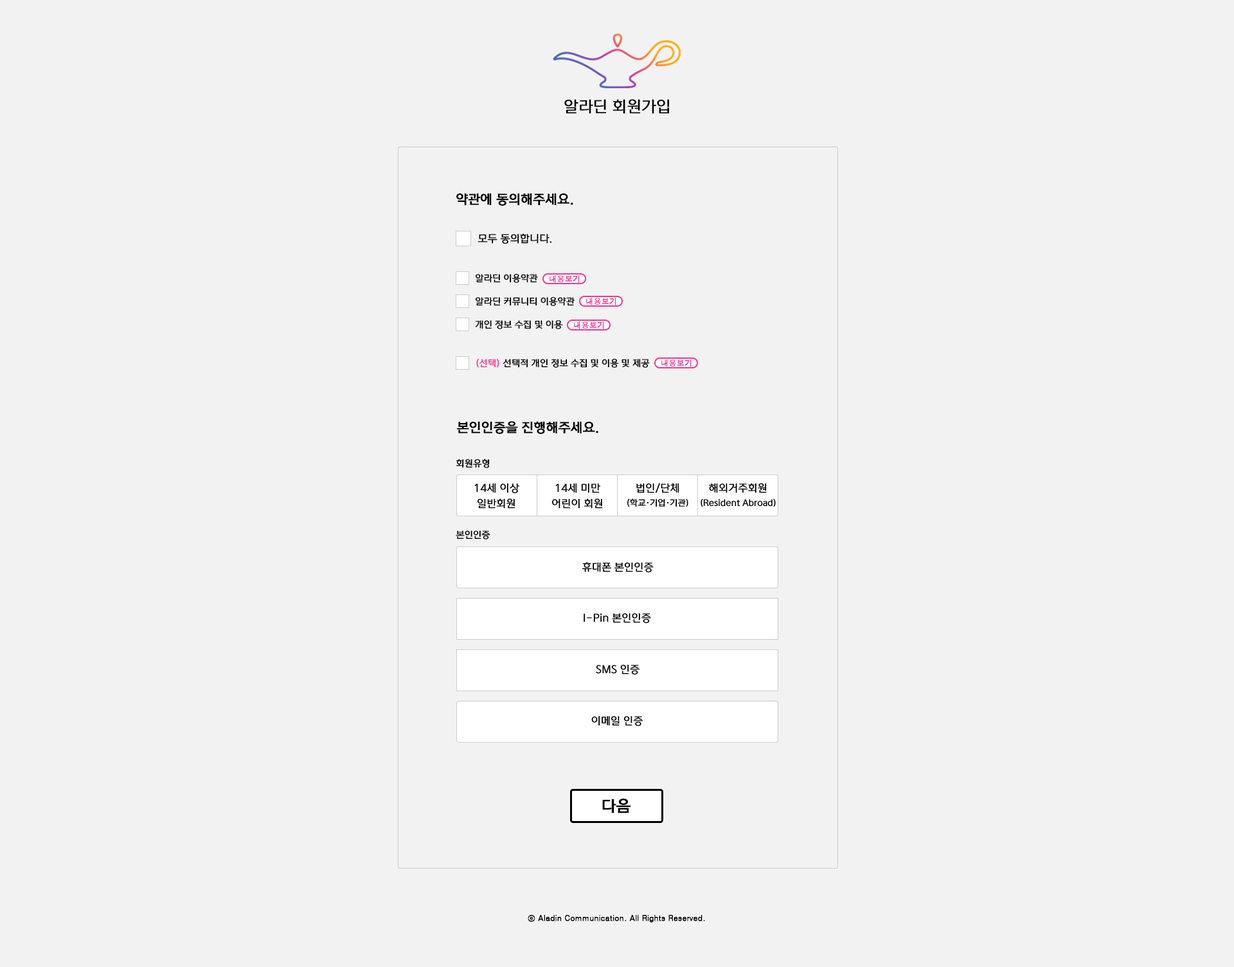
<style>
.page{position:relative;width:1234px;height:967px;background:#f2f2f2}
.page>*{position:absolute;margin:0}
.t1{font:15.4px "ONEMobileRegular";color:#000000;font-weight:bold}
.t2{font:12.9px "ONEMobileBold";color:#000000;font-weight:bold}
.t3{font:10.3px "ONEMobileRegular";color:#000000;font-weight:bold}
.t4{font:9px "ONEMobileRegular";color:#000000;font-weight:bold}
.t5{font:7.7px "Dotum";color:#ee3897;font-weight:bold}
.t6{font:9px "ONEMobileRegular";color:#ee3897;font-weight:bold}
.t7{font:10.3px/15.4px "ONEMobileRegular";color:#000000;font-weight:bold}
.t8{font:8.4px/15.4px "ONEMobileRegular";color:#000000;font-weight:bold}
.t9{font:15.4px "ONEMobileBold";color:#000000;font-weight:bold}
.t10{font:7.7px "Dotum";color:#000000;font-weight:bold}
</style>
<div class="page">
<p class="t1" style="left:564px;top:99px;width:106px;height:15px">알라딘 회원가입</p>
<p class="t2" style="left:456px;top:193px;width:117px;height:13px">약관에 동의해주세요.</p>
<p class="t3" style="left:478px;top:233px;width:74px;height:11px">모두 동의합니다.</p>
<p class="t4" style="left:475px;top:273px;width:63px;height:10px">알라딘 이용약관</p>
<p class="t5" style="left:550px;top:275px;width:30px;height:8px">내용보기</p>
<p class="t4" style="left:475px;top:296px;width:100px;height:10px">알라딘 커뮤니티 이용약관</p>
<p class="t5" style="left:586px;top:298px;width:30px;height:7px">내용보기</p>
<p class="t4" style="left:475px;top:320px;width:88px;height:9px">개인 정보 수집 및 이용</p>
<p class="t5" style="left:574px;top:321px;width:30px;height:8px">내용보기</p>
<p class="t4" style="left:476px;top:358px;width:174px;height:10px"><span class="t6">(선택)</span> 선택적 개인 정보 수집 및 이용 및 제공</p>
<p class="t5" style="left:662px;top:359px;width:30px;height:8px">내용보기</p>
<p class="t2" style="left:457px;top:421px;width:141px;height:13px">본인인증을 진행해주세요.</p>
<p class="t4" style="left:456px;top:458px;width:34px;height:10px">회원유형</p>
<p class="t7" style="left:474px;top:483px;width:45px;height:26px;text-align:center">14세 이상<br>일반회원</p>
<p class="t7" style="left:552px;top:483px;width:51px;height:26px;text-align:center">14세 미만<br>어린이 회원</p>
<p class="t8" style="left:627px;top:483px;width:61px;height:24px;text-align:center"><span class="t7">법인/단체<br></span>(학교·기업·기관)</p>
<p class="t8" style="left:701px;top:483px;width:75px;height:24px;text-align:center"><span class="t7">해외거주회원<br></span>(Resident Abroad)</p>
<p class="t4" style="left:456px;top:530px;width:35px;height:9px">본인인증</p>
<p class="t3" style="left:582px;top:562px;width:72px;height:11px">휴대폰 본인인증</p>
<p class="t3" style="left:584px;top:613px;width:67px;height:11px">I-Pin 본인인증</p>
<p class="t3" style="left:596px;top:664px;width:44px;height:11px">SMS 인증</p>
<p class="t3" style="left:591px;top:716px;width:53px;height:10px">이메일 인증</p>
<p class="t9" style="left:602px;top:798px;width:29px;height:15px">다음</p>
<p class="t10" style="left:528px;top:915px;width:177px;height:8px">ⓒ Aladin Communication. All Rights Reserved.</p>
</div>
